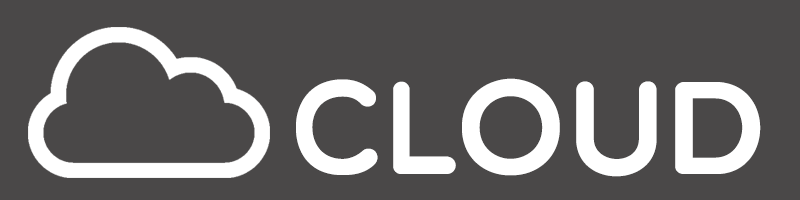
<style>
.page{position:relative;width:800px;height:200px;background:#4a4848}
.page>*{position:absolute;margin:0}
.t1{font:133px "Multicolore";color:#ffffff}
</style>
<div class="page">
<p class="t1" style="left:296px;top:78px;width:465px;height:99px">Cloud</p>
</div>
